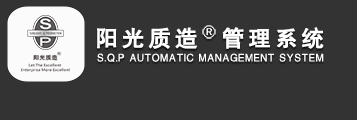
<style>
.page{position:relative;width:357px;height:120px;background:#333333}
.page>*{position:absolute;margin:0}
.t1{font:22.3px "FZHTJW--GB1-0";letter-spacing:0.15em;color:#ffffff;font-weight:bold}
.t2{font:10.5px "FZHTJW--GB1-0";letter-spacing:0.15em;color:#ffffff;scale:0.94 1}
</style>
<div class="page">
<p class="t1" style="left:97px;top:27px;width:227px;height:22px">阳光质造  管理系统</p>
<p class="t2" style="left:97px;top:53px;width:227px;height:9px">S.Q.P AUTOMATIC MANAGEMENT SYSTEM</p>
</div>
